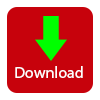
<style>
.page{position:relative;width:100px;height:100px;background:#c7020c}
.page>*{position:absolute;margin:0}
.t1{font:16px "MyriadPro-Regular";color:#fffefe}
</style>
<div class="page">
<p class="t1" style="left:15px;top:66px;width:68px;height:12px">Download</p>
</div>
